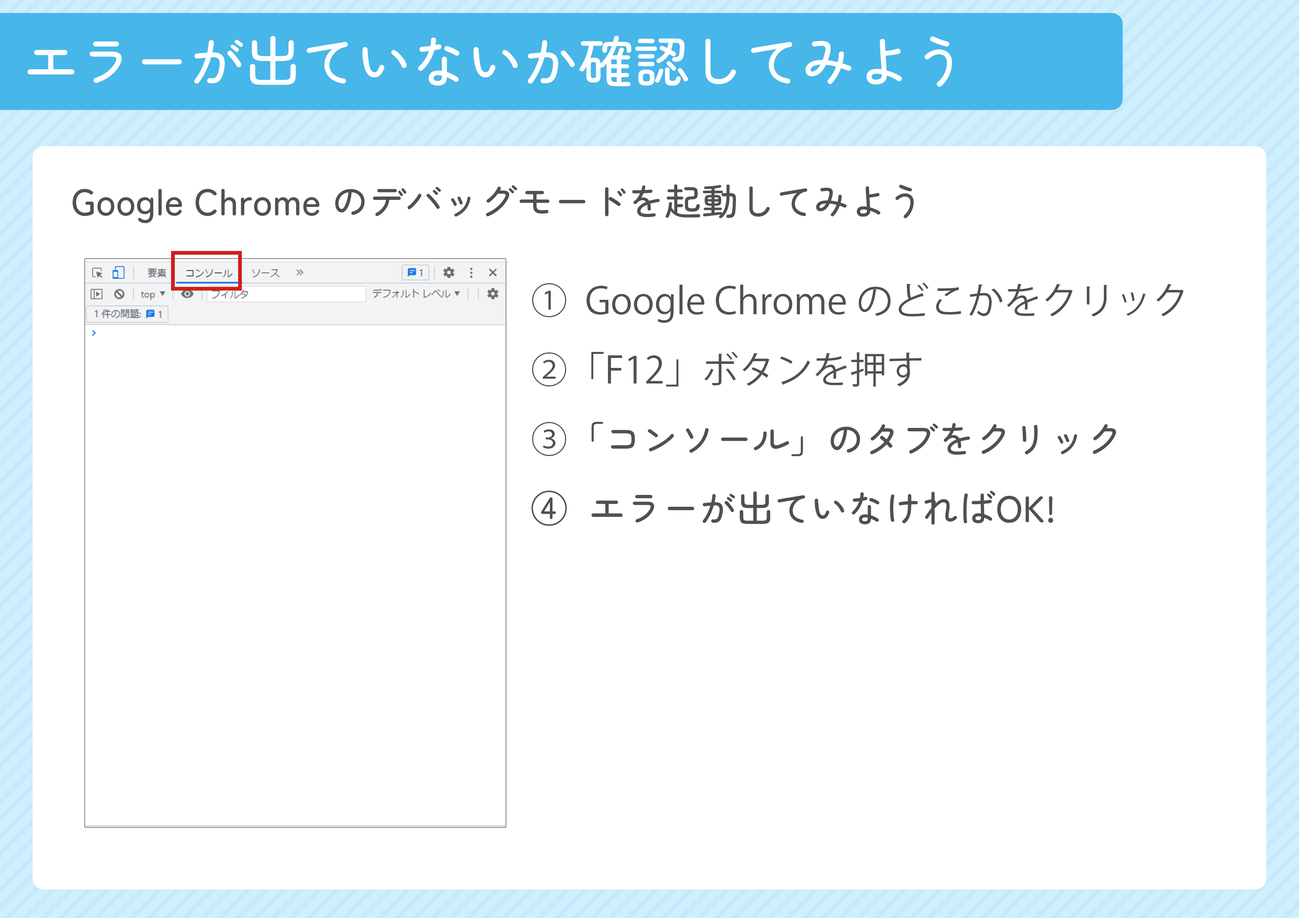
<style>
.page{position:relative;width:1299px;height:918px;background:#ffffff}
.page>*{position:absolute;margin:0}
.t1{font:55.5px "ZenMaruGothic-Medium";color:#ffffff}
.t2{font:37px "ZenMaruGothic-Medium";color:#505050}
.t3{font:37px/69.4px "KozGoPr6N-Regular";color:#505050}
.t4{font:37px/69.4px "ZenMaruGothic-Medium";color:#505050}
</style>
<div class="page">
<p class="t1" style="left:27px;top:36px;width:925px;height:51px">エラーが出ていないか確認してみよう</p>
<p class="t2" style="left:73px;top:184px;width:841px;height:39px">Google Chrome のデバッグモードを起動してみよう</p>
<p class="t3" style="left:531px;top:282px;width:653px;height:244px">①  Google Chrome のどこかをクリック<br>②「F12」ボタンを押す<br>③<span class="t4">「コンソール」のタブをクリック<br>④  エラーが出ていなければOK!</span></p>
</div>
